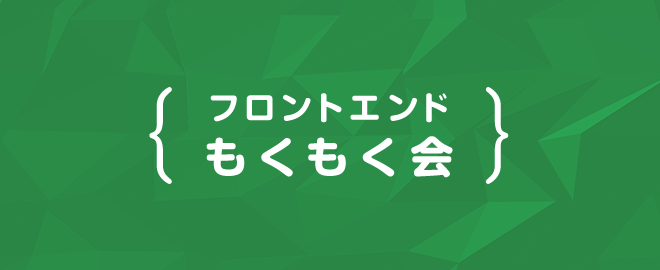
<style>
.page{position:relative;width:660px;height:270px}
.page>*{position:absolute;margin:0}
.t1{font:32.2px/53.6px "GShinMGoPro-Bold";letter-spacing:0.18em;color:#ffffff}
.t2{font:43px/53.6px "GShinMGoPro-Bold";letter-spacing:0.22em;color:#ffffff}
</style>
<div class="page">
<p class="t1" style="left:206px;top:93px;width:247px;height:85px;text-align:center">フロントエンド<br><span class="t2">もくもく会</span></p>
</div>
